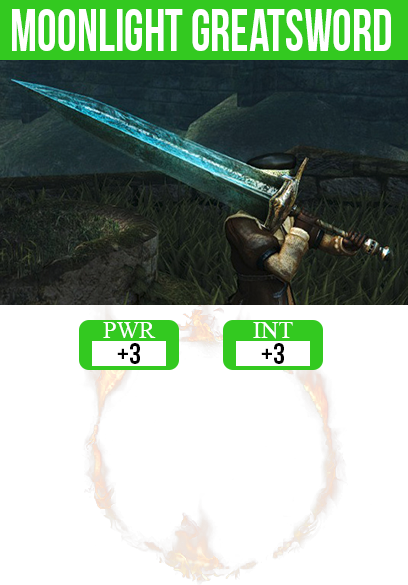
<style>
.page{position:relative;width:408px;height:585px;background:#ffffff}
.page>*{position:absolute;margin:0}
.t1{font:59.5px "BebasNeue";color:#ffffff;scale:0.84 1}
.t2{font:24px "TimesNewRomanPSMT";color:#ffffff}
.t3{font:30px "BebasNeue";color:#000000}
</style>
<div class="page">
<p class="t1" style="left:12px;top:9px;width:379px;height:42px">moonlight greatsword</p>
<p class="t2" style="left:103px;top:322px;width:53px;height:16px">PWR</p>
<p class="t2" style="left:253px;top:322px;width:40px;height:17px">INT</p>
<p class="t3" style="left:117px;top:343px;width:23px;height:21px">+3</p>
<p class="t3" style="left:261px;top:343px;width:23px;height:21px">+3</p>
</div>
